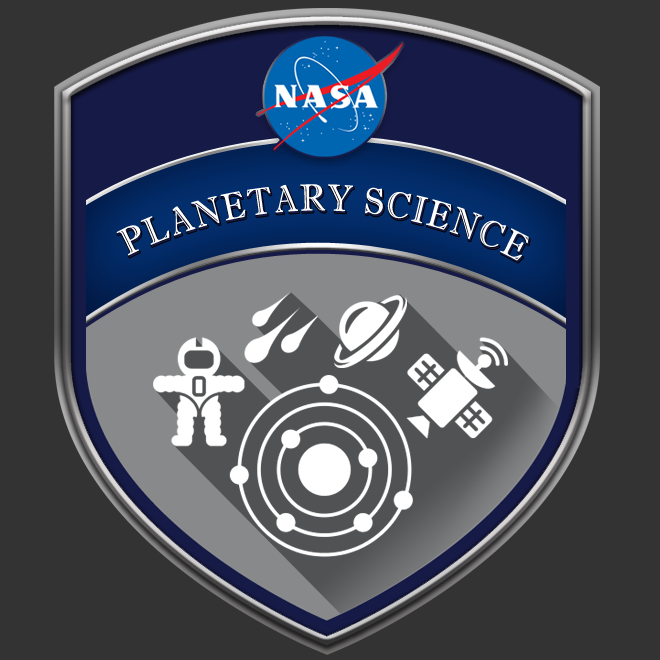
<style>
.page{position:relative;width:660px;height:660px;background:#333333}
.page>*{position:absolute;margin:0}
.t1{font:37.5px "ImprintMT-Shadow";letter-spacing:0.08em;color:#ffffff;scale:0.8 1}
</style>
<div class="page">
<p class="t1" style="left:116px;top:184px;width:413px;height:77px;rotate:1deg">PLANETARY SCIENCE</p>
</div>
